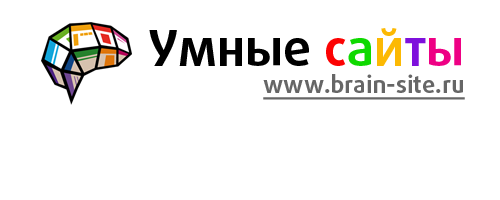
<style>
.page{position:relative;width:500px;height:200px;background:#ffffff}
.page>*{position:absolute;margin:0}
.t1{font:50px "DaxlinePro-Bold";color:#000000}
.t2{font:50px "DaxlinePro-Bold";color:#fc0303}
.t3{font:50px "DaxlinePro-Bold";color:#0fd900}
.t4{font:50px "DaxlinePro-Bold";color:#fcb903}
.t5{font:50px "DaxlinePro-Bold";color:#7e10dc}
.t6{font:50px "DaxlinePro-Bold";color:#ee0084}
.t7{font:24px "DaxlinePro-Bold";color:#666666;text-decoration:underline}
</style>
<div class="page">
<p class="t1" style="left:149px;top:28px;width:312px;height:38px">Умные<span class="t2"> с</span><span class="t3">а</span><span class="t4">й</span><span class="t5">т</span><span class="t6">ы</span></p>
<p class="t7" style="left:263px;top:74px;width:202px;height:26px">www.brain-site.ru</p>
</div>
